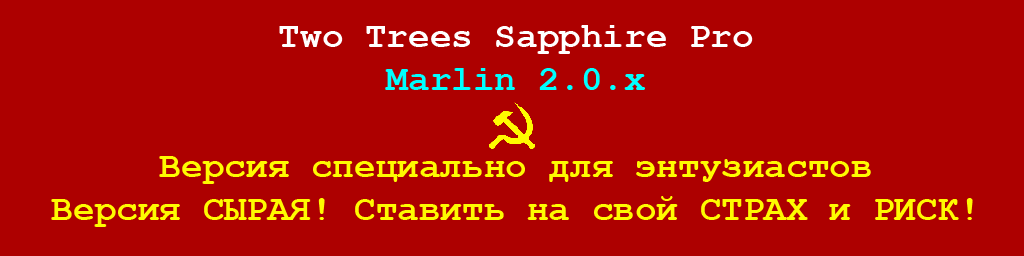
<style>
.page{position:relative;width:1024px;height:256px;background:#ad0000}
.page>*{position:absolute;margin:0}
.t1{font:36px "CourierNewPS-BoldMT";color:#fefb00}
.t2{font:36px "CourierNewPS-BoldMT";color:#ffffff}
.t3{font:36px "CourierNewPS-BoldMT";color:#00ffff}
</style>
<div class="page">
<p class="t1" style="left:51px;top:25px;width:922px;height:202px;text-align:center"><span class="t2">Two Trees Sapphire Pro<br></span><span class="t3">Marlin 2.0.x<br></span><br>Версия cпециально для энтузиастов<br>Версия CЫРАЯ! Ставить на свой СТРАХ и РИСК!</p>
</div>
